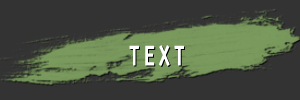
<style>
.page{position:relative;width:300px;height:100px;background:#333333}
.page>*{position:absolute;margin:0}
.t1{font:36px "OratorStd";color:#ffffff;font-weight:bold;scale:0.67 1}
</style>
<div class="page">
<p class="t1" style="left:129px;top:45px;width:55px;height:21px">text</p>
</div>
